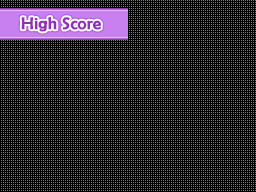
<style>
.page{position:relative;width:256px;height:192px;background:#000000}
.page>*{position:absolute;margin:0}
.t1{font:17.3px "BerlinSansFB-Reg";color:#9030b8;font-weight:bold}
</style>
<div class="page">
<p class="t1" style="left:21px;top:17px;width:80px;height:15px">High Score</p>
</div>
